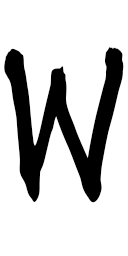
<style>
.page{position:relative;width:128px;height:256px;background:#ffffff}
.page>*{position:absolute;margin:0}
.t1{font:250px "AB-fudeshichi";letter-spacing:0.42em;color:#000000;scale:0.57 1}
</style>
<div class="page">
<p class="t1" style="left:4px;top:46px;width:120px;height:157px">W</p>
</div>
